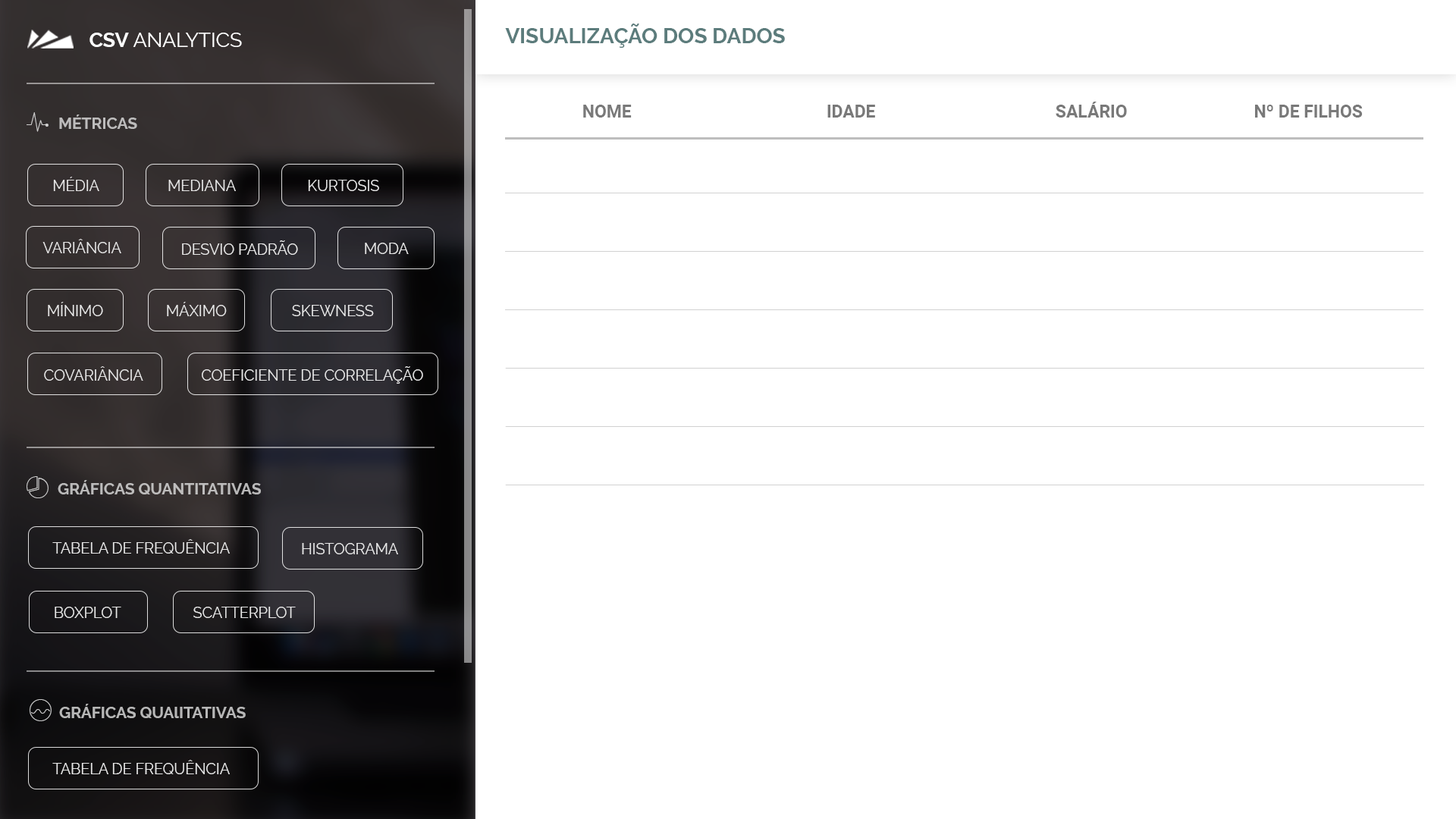
<style>
.page{position:relative;width:1456px;height:819px;background:#ffffff}
.page>*{position:absolute;margin:0}
.t1{font:21.2px "Raleway-Bold";color:#5c7c7c}
.t2{font:20px "Raleway-Regular";color:#ffffff}
.t3{font:20px "Raleway-Bold";color:#ffffff}
.t4{font:17.4px "Roboto-Bold";color:#797979}
.t5{font:15.8px "Raleway-Bold";color:#bdbcbc}
.t6{font:14.9px "Raleway-Regular";color:#ffffff}
.t7{font:14.9px "Raleway-Regular";color:#e5e5e5}
.t8{font:14.9px "Raleway-Regular";color:#e7e7e7}
.t9{font:15.8px "Raleway-Bold";color:#bcbbbb}
.t10{font:14.9px "Raleway-Regular";color:#e6e6e6}
.t11{font:15.8px "Raleway-Bold";color:#b7b7b7}
</style>
<div class="page">
<p class="t1" style="left:505px;top:24px;width:280px;height:24px">VISUALIZAÇÃO DOS DADOS</p>
<p class="t2" style="left:89px;top:33px;width:153px;height:14px"><span class="t3">CSV</span> ANALYTICS</p>
<p class="t4" style="left:1056px;top:102px;width:71px;height:16px">SALÁRIO</p>
<p class="t4" style="left:583px;top:105px;width:49px;height:13px">NOME</p>
<p class="t4" style="left:827px;top:105px;width:48px;height:13px">IDADE</p>
<p class="t4" style="left:1255px;top:105px;width:108px;height:13px">Nº DE FILHOS</p>
<p class="t5" style="left:59px;top:115px;width:78px;height:14px">MÉTRICAS</p>
<p class="t6" style="left:53px;top:177px;width:46px;height:14px;opacity:0.85">MÉDIA</p>
<p class="t6" style="left:168px;top:180px;width:68px;height:11px;opacity:0.85">MEDIANA</p>
<p class="t7" style="left:308px;top:180px;width:71px;height:11px">KURTOSIS</p>
<p class="t6" style="left:42px;top:239px;width:79px;height:14px;opacity:0.85">VARIÂNCIA</p>
<p class="t6" style="left:182px;top:240px;width:116px;height:15px;opacity:0.85">DESVIO PADRÃO</p>
<p class="t8" style="left:365px;top:243px;width:44px;height:11px">MODA</p>
<p class="t6" style="left:48px;top:302px;width:55px;height:14px;opacity:0.85">MÍNIMO</p>
<p class="t6" style="left:167px;top:302px;width:60px;height:14px;opacity:0.85">MÁXIMO</p>
<p class="t6" style="left:292px;top:305px;width:82px;height:11px;opacity:0.85">SKEWNESS</p>
<p class="t6" style="left:44px;top:366px;width:99px;height:15px;opacity:0.85">COVARIÂNCIA</p>
<p class="t6" style="left:202px;top:366px;width:221px;height:18px;opacity:0.85">COEFICIENTE DE CORRELAÇÃO</p>
<p class="t9" style="left:58px;top:480px;width:203px;height:14px">GRÁFICAS QUANTITATIVAS</p>
<p class="t10" style="left:52px;top:539px;width:178px;height:15px">TABELA DE FREQUÊNCIA</p>
<p class="t6" style="left:302px;top:543px;width:96px;height:11px;opacity:0.85">HISTOGRAMA</p>
<p class="t10" style="left:55px;top:607px;width:66px;height:11px">BOXPLOT</p>
<p class="t10" style="left:193px;top:607px;width:103px;height:11px">SCATTERPLOT</p>
<p class="t11" style="left:59px;top:704px;width:187px;height:14px">GRÁFICAS QUAlITATIVAS</p>
<p class="t10" style="left:52px;top:760px;width:178px;height:14px">TABELA DE FREQUÊNCIA</p>
</div>
